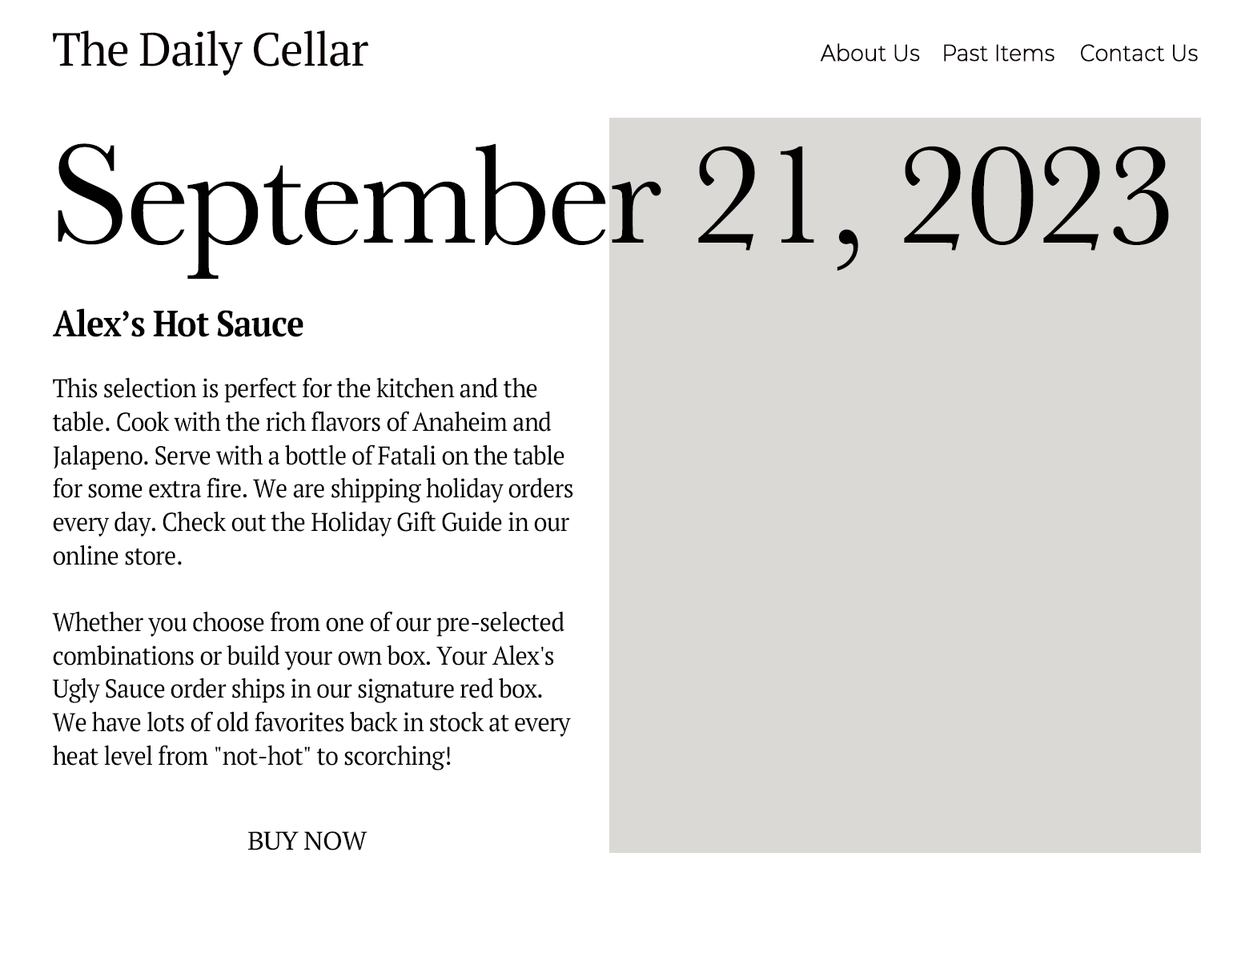
<style>
.page{position:relative;width:1241px;height:961px;background:#ffffff}
.page>*{position:absolute;margin:0}
.t1{font:46.7px "PTSerif-Regular";letter-spacing:-0.025em;color:#090000}
.t2{font:23.4px "Montserrat-Light";letter-spacing:-0.01em;color:#090000;font-weight:bold;scale:0.9 1}
.t3{font:146.8px "Baskerville";letter-spacing:-0.025em;color:#010101}
.t4{font:36.7px "PTSerif-Bold";letter-spacing:-0.025em;color:#000000;scale:0.9 1}
.t5{font:25.9px/33.4px "PTSerif-Regular";letter-spacing:-0.025em;color:#000000;scale:0.95 1}
.t6{font:25.7px "PTSerif-Regular";letter-spacing:-0.025em;color:#050505;scale:1.05 1}
</style>
<div class="page">
<p class="t1" style="left:53px;top:30px;width:315px;height:46px">The Daily Cellar</p>
<p class="t2" style="left:820px;top:43px;width:378px;height:19px">About Us   Past Items  Contact Us</p>
<p class="t3" style="left:58px;top:143px;width:1111px;height:136px">September 21, 2023</p>
<p class="t4" style="left:53px;top:308px;width:250px;height:29px">Alex’s Hot Sauce</p>
<p class="t5" style="left:52px;top:377px;width:521px;height:393px">This selection is perfect for the kitchen and the <br>table. Cook with the rich flavors of Anaheim and <br>Jalapeno. Serve with a bottle of Fatali on the table <br>for some extra fire. We are shipping holiday orders <br>every day. Check out the Holiday Gift Guide in our <br>online store. <br><br>Whether you choose from one of our pre-selected <br>combinations or build your own box. Your Alex's <br>Ugly Sauce order ships in our signature red box. <br>We have lots of old favorites back in stock at every <br>heat level from "not-hot" to scorching!</p>
<p class="t6" style="left:248px;top:831px;width:120px;height:19px">BUY NOW</p>
</div>
